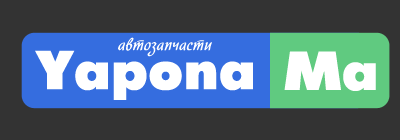
<style>
.page{position:relative;width:400px;height:140px;background:#333333}
.page>*{position:absolute;margin:0}
.t1{font:16.4px "HortensiaC";color:#ffffff}
.t2{font:54.5px "FuturaFuturisXC";color:#ffffff}
</style>
<div class="page">
<p class="t1" style="left:118px;top:37px;width:94px;height:20px">автозапчасти</p>
<p class="t2" style="left:35px;top:50px;width:218px;height:50px">Yapona</p>
<p class="t2" style="left:284px;top:51px;width:92px;height:40px">Ma</p>
</div>
